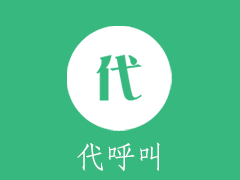
<style>
.page{position:relative;width:240px;height:180px;background:#36b87f}
.page>*{position:absolute;margin:0}
.t1{font:30px "STFangsong";color:#fdfcfc}
</style>
<div class="page">
<p class="t1" style="left:77px;top:142px;width:83px;height:29px">代呼叫</p>
</div>
